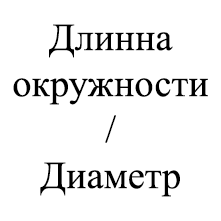
<style>
.page{position:relative;width:221px;height:221px;background:#ffffff}
.page>*{position:absolute;margin:0}
.t1{font:38.3px "TimesNewRomanPSMT";color:#000000}
</style>
<div class="page">
<p class="t1" style="left:13px;top:24px;width:195px;height:173px;text-align:center">Длинна<br>окружности<br>/<br>Диаметр</p>
</div>
